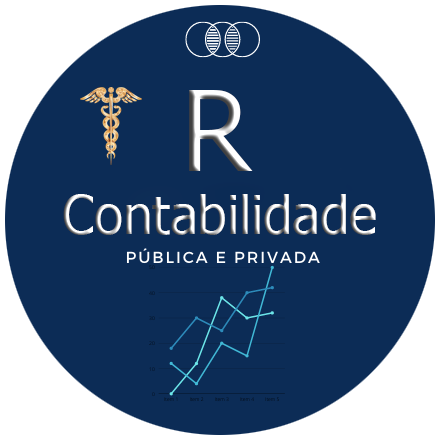
<style>
.page{position:relative;width:446px;height:439px;background:#0c2c56}
.page>*{position:absolute;margin:0}
.t1{font:83.9px "Tahoma"}
.t2{font:39.5px "Tahoma"}
</style>
<div class="page">
<p class="t1" style="left:189px;top:90px;width:64px;height:81px">R</p>
<p class="t2" style="left:63px;top:194px;width:313px;height:41px">Contabilidade</p>
</div>
